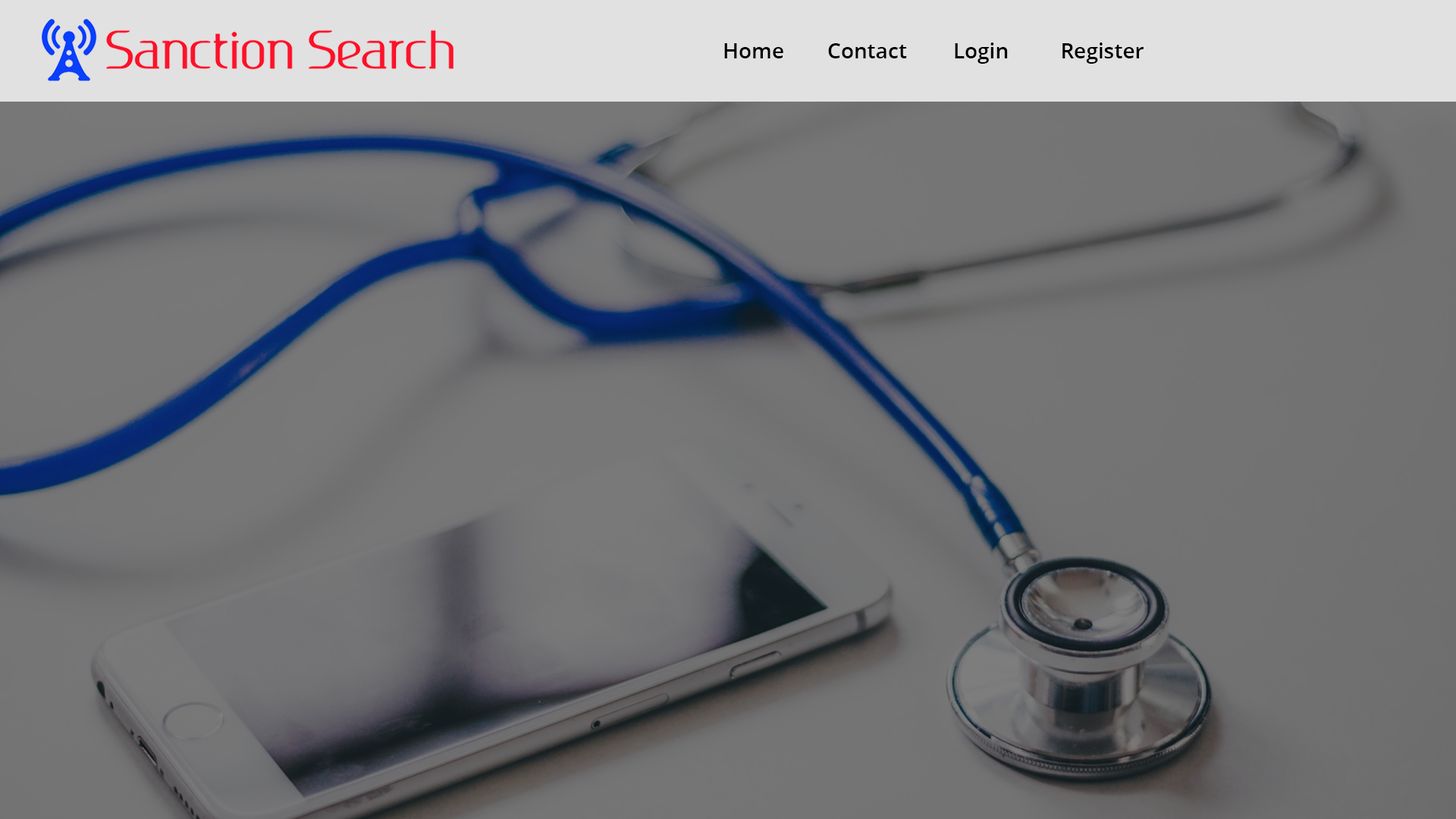
<style>
.page{position:relative;width:1456px;height:819px}
.page>*{position:absolute;margin:0}
.t1{font:21.2px "OpenSans-Semibold";color:#000000}
</style>
<div class="page">
<p class="t1" style="left:724px;top:43px;width:59px;height:15px">Home</p>
<p class="t1" style="left:828px;top:43px;width:79px;height:15px">Contact</p>
<p class="t1" style="left:955px;top:42px;width:53px;height:22px">Login</p>
<p class="t1" style="left:1062px;top:42px;width:82px;height:22px">Register</p>
</div>
